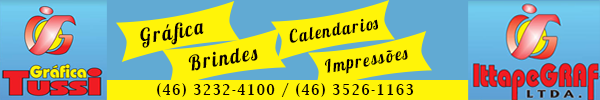
<style>
.page{position:relative;width:600px;height:100px;background:#fff408}
.page>*{position:absolute;margin:0}
.t1{font:21px "Lobster1.4";letter-spacing:0.1em;color:#0a0001;scale:0.9 1}
.t2{font:18px "Lobster1.4";letter-spacing:0.1em;color:#0a0001;scale:0.9 1}
.t3{font:15px "LucidaBright-Demi";letter-spacing:0.1em;color:#0a0001;scale:0.9 1}
</style>
<div class="page">
<p class="t1" style="left:140px;top:22px;width:64px;height:26px;rotate:-9deg">Gráfica</p>
<p class="t2" style="left:289px;top:18px;width:89px;height:25px;rotate:-9deg">Calendarios</p>
<p class="t1" style="left:188px;top:47px;width:70px;height:24px;rotate:-9deg">Brindes</p>
<p class="t2" style="left:325px;top:49px;width:83px;height:25px;rotate:-9deg">Impressões</p>
<p class="t3" style="left:157px;top:83px;width:257px;height:14px">(46) 3232-4100 / (46) 3526-1163</p>
</div>
